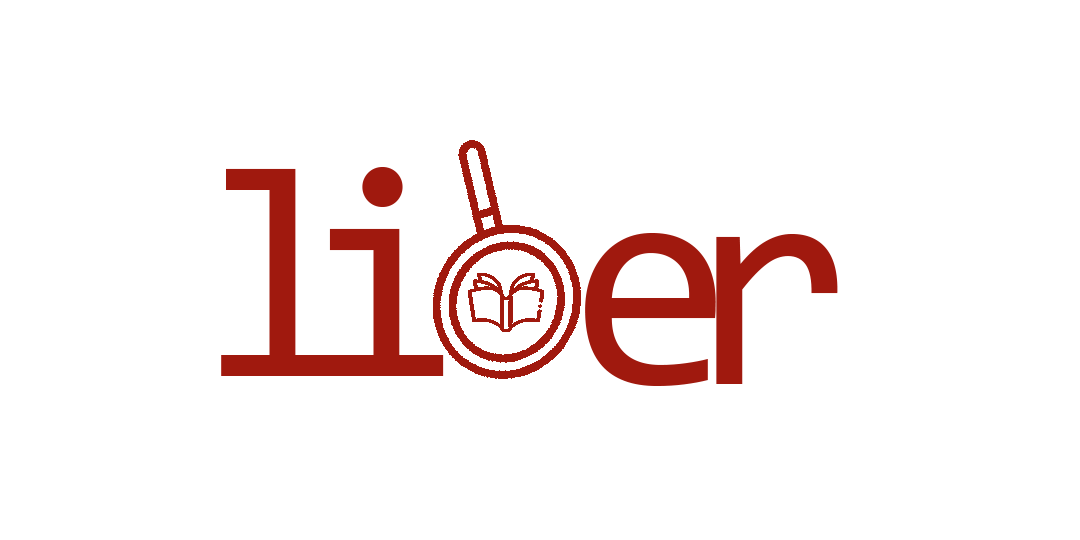
<style>
.page{position:relative;width:1080px;height:540px;background:#ffffff}
.page>*{position:absolute;margin:0}
.t1{font:300px "Consolas";color:#a0190e}
</style>
<div class="page">
<p class="t1" style="left:221px;top:168px;width:119px;height:208px">l</p>
<p class="t1" style="left:325px;top:166px;width:119px;height:210px">i</p>
<p class="t1" style="left:585px;top:232px;width:131px;height:154px">e</p>
<p class="t1" style="left:716px;top:233px;width:122px;height:151px">r</p>
</div>
